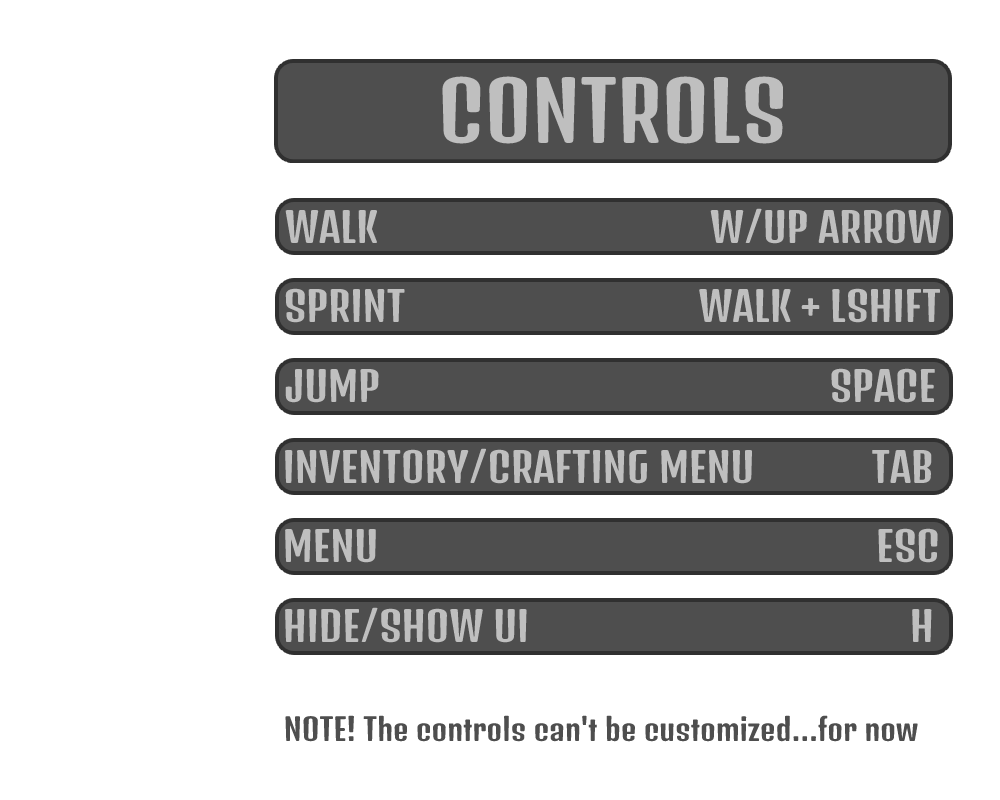
<style>
.page{position:relative;width:1000px;height:800px;background:#ffffff}
.page>*{position:absolute;margin:0}
.t1{font:80px "DenkOne-Regular";color:#bfbfbf}
.t2{font:40px "DenkOne-Regular";color:#bfbfbf}
.t3{font:30px "DenkOne-Regular";color:#4e4e4e}
</style>
<div class="page">
<p class="t1" style="left:442px;top:76px;width:342px;height:68px">CONTROLS</p>
<p class="t2" style="left:285px;top:208px;width:656px;height:36px">WALK                                  W/UP ARROW</p>
<p class="t2" style="left:285px;top:288px;width:656px;height:35px">SPRINT                              WALK + LSHIFT</p>
<p class="t2" style="left:285px;top:368px;width:650px;height:35px">JUMP                                              SPACE</p>
<p class="t2" style="left:285px;top:448px;width:647px;height:36px">INVENTORY/CRAFTING MENU            TAB</p>
<p class="t2" style="left:285px;top:528px;width:653px;height:35px">MENU                                                   ESC</p>
<p class="t2" style="left:285px;top:607px;width:647px;height:36px">HIDE/SHOW UI                                       H</p>
<p class="t3" style="left:285px;top:715px;width:633px;height:27px">NOTE! The controls can't be customized...for now</p>
</div>
